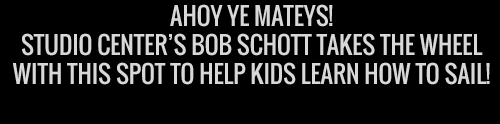
<style>
.page{position:relative;width:500px;height:124px;background:#000000}
.page>*{position:absolute;margin:0}
.t1{font:24px/29px "Oswald-Regular";color:#d8d8d8;text-transform:uppercase}
</style>
<div class="page">
<p class="t1" style="left:13px;top:4px;width:477px;height:81px;text-align:center">Ahoy Ye Mateys!<br>Studio Center’s Bob Schott takes the wheel with this spot to help kids learn how to sail!</p>
</div>
